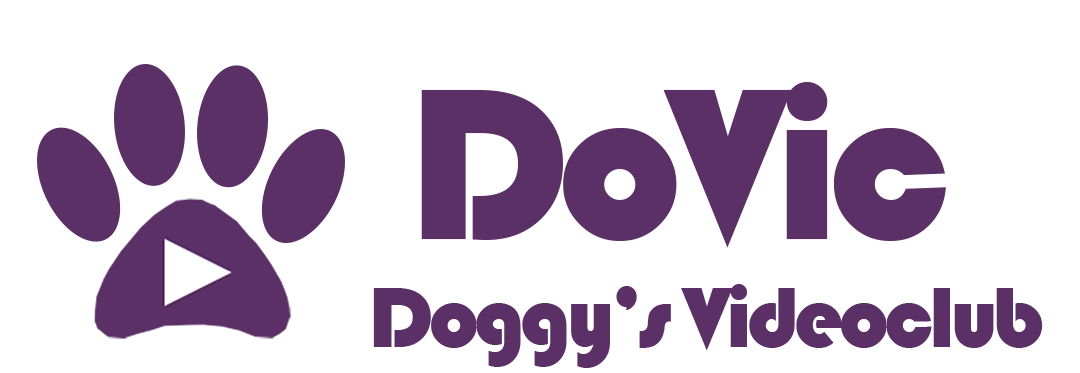
<style>
.page{position:relative;width:1080px;height:373px;background:#ffffff}
.page>*{position:absolute;margin:0}
.t1{font:223.1px "Bauhaus93";letter-spacing:-0.05em;color:#5b3066}
.t2{font:89px "Bauhaus93";letter-spacing:-0.05em;color:#5b3066}
</style>
<div class="page">
<p class="t1" style="left:421px;top:81px;width:525px;height:167px">DoVic</p>
<p class="t2" style="left:373px;top:284px;width:670px;height:84px">Doggy’s Videoclub</p>
</div>
